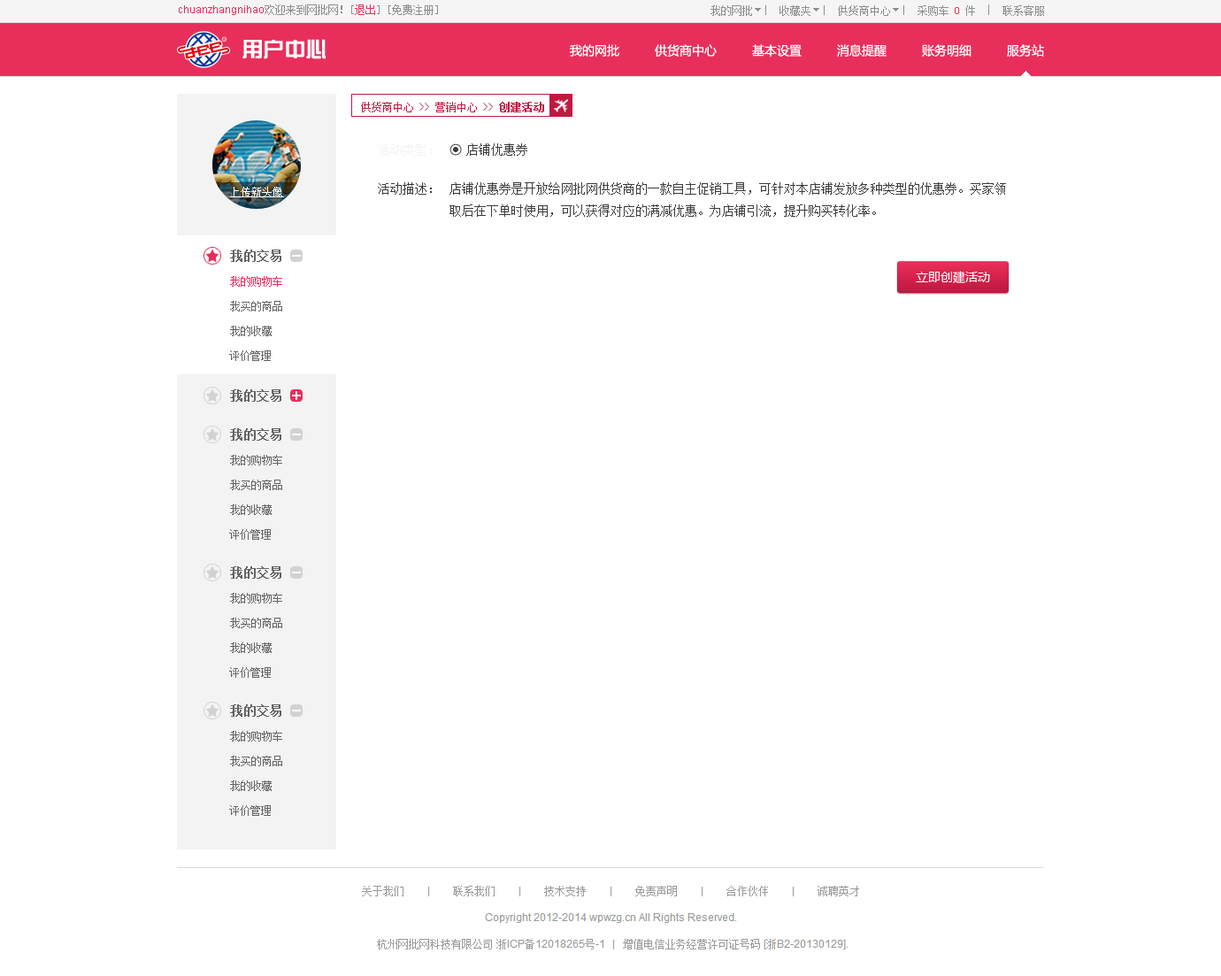
<style>
.page{position:relative;width:1221px;height:976px;background:#ffffff}
.page>*{position:absolute;margin:0}
.t1{font:10.6px "ArialMT";color:#e82f5b}
.t2{font:10.6px "SimSun";color:#8e8e8e}
.t3{font:10.6px "SimSun";color:#e82f5b}
.t4{font:21.2px "JZhongYi";color:#ffffff}
.t5{font:12.4px "MicrosoftYaHei";color:#ffffff}
.t6{font:12.4px "SimSun";color:#f3f3f3}
.t7{font:12.4px "SimSun";color:#3c3c3c}
.t8{font:10.6px "SimSun";color:#ffffff;text-decoration:underline}
.t9{font:12.4px "SimSun";color:#646464;font-weight:bold}
.t10{font:10.6px "SimSun";color:#646464}
</style>
<div class="page">
<p class="t1" style="left:179px;top:4px;width:259px;height:11px">chuanzhangnihao<span class="t2">欢迎来到网批网！[</span><span class="t3">退出</span><span class="t2">] [免费注册]</span></p>
<p class="t2" style="left:711px;top:5px;width:333px;height:11px">我的网批     收藏夹     供货商中心     采购车 <span class="t3">0</span> 件     联系客服</p>
<p class="t4" style="left:243px;top:39px;width:83px;height:20px">用户中心</p>
<p class="t5" style="left:570px;top:44px;width:50px;height:13px">我的网批</p>
<p class="t5" style="left:655px;top:44px;width:62px;height:13px">供货商中心</p>
<p class="t5" style="left:752px;top:44px;width:50px;height:13px">基本设置</p>
<p class="t5" style="left:837px;top:44px;width:50px;height:13px">消息提醒</p>
<p class="t5" style="left:922px;top:44px;width:50px;height:13px">账务明细</p>
<p class="t5" style="left:1007px;top:44px;width:37px;height:13px">服务站</p>
<p class="t6" style="left:378px;top:143px;width:54px;height:13px">活动类型：</p>
<p class="t7" style="left:466px;top:143px;width:62px;height:13px">店铺优惠券</p>
<p class="t7" style="left:378px;top:182px;width:54px;height:13px">活动描述：</p>
<p class="t7" style="left:450px;top:182px;width:556px;height:35px">店铺优惠券是开放给网批网供货商的一款自主促销工具，可针对本店铺发放多种类型的优惠券。买家领<br>取后在下单时使用，可以获得对应的满减优惠。为店铺引流，提升购买转化率。</p>
<p class="t8" style="left:230px;top:187px;width:54px;height:10px">上传新头像</p>
<p class="t9" style="left:230px;top:250px;width:51px;height:12px">我的交易</p>
<p class="t3" style="left:230px;top:276px;width:52px;height:11px">我的购物车</p>
<p class="t5" style="left:916px;top:271px;width:74px;height:12px">立即创建活动</p>
<p class="t10" style="left:230px;top:301px;width:52px;height:11px">我买的商品</p>
<p class="t10" style="left:230px;top:326px;width:42px;height:10px">我的收藏</p>
<p class="t10" style="left:229px;top:350px;width:42px;height:11px">评价管理</p>
<p class="t9" style="left:230px;top:389px;width:51px;height:13px">我的交易</p>
<p class="t9" style="left:230px;top:428px;width:51px;height:13px">我的交易</p>
<p class="t10" style="left:230px;top:455px;width:52px;height:11px">我的购物车</p>
<p class="t10" style="left:230px;top:480px;width:52px;height:10px">我买的商品</p>
<p class="t10" style="left:230px;top:505px;width:42px;height:10px">我的收藏</p>
<p class="t10" style="left:229px;top:529px;width:42px;height:11px">评价管理</p>
<p class="t9" style="left:230px;top:566px;width:51px;height:13px">我的交易</p>
<p class="t10" style="left:230px;top:593px;width:52px;height:11px">我的购物车</p>
<p class="t10" style="left:230px;top:618px;width:52px;height:10px">我买的商品</p>
<p class="t10" style="left:230px;top:643px;width:42px;height:10px">我的收藏</p>
<p class="t10" style="left:229px;top:667px;width:42px;height:11px">评价管理</p>
<p class="t9" style="left:230px;top:705px;width:51px;height:12px">我的交易</p>
<p class="t10" style="left:230px;top:731px;width:52px;height:11px">我的购物车</p>
<p class="t10" style="left:230px;top:756px;width:52px;height:10px">我买的商品</p>
<p class="t10" style="left:230px;top:781px;width:42px;height:10px">我的收藏</p>
<p class="t10" style="left:229px;top:805px;width:42px;height:11px">评价管理</p>
</div>
